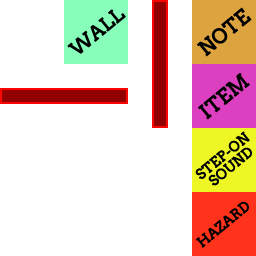
<style>
.page{position:relative;width:256px;height:256px;background:#ffffff}
.page>*{position:absolute;margin:0}
.t1{font:18.9px "Arvo";color:#000000;font-weight:bold}
.t2{font:19.9px "Arvo";color:#000000;font-weight:bold}
.t3{font:13.9px/13.2px "Arvo";color:#000000;font-weight:bold}
.t4{font:13.9px "Arvo";color:#000000;font-weight:bold}
</style>
<div class="page">
<p class="t1" style="left:67px;top:9px;width:59px;height:45px;rotate:-39deg">WALL</p>
<p class="t2" style="left:197px;top:7px;width:55px;height:50px;rotate:-39deg">NOTE</p>
<p class="t2" style="left:198px;top:73px;width:52px;height:47px;rotate:-39deg">ITEM</p>
<p class="t3" style="left:195px;top:131px;width:57px;height:55px;text-align:center;rotate:-39deg">STEP-ON<br>SOUND</p>
<p class="t4" style="left:196px;top:201px;width:53px;height:47px;rotate:-39deg">HAZARD</p>
</div>
